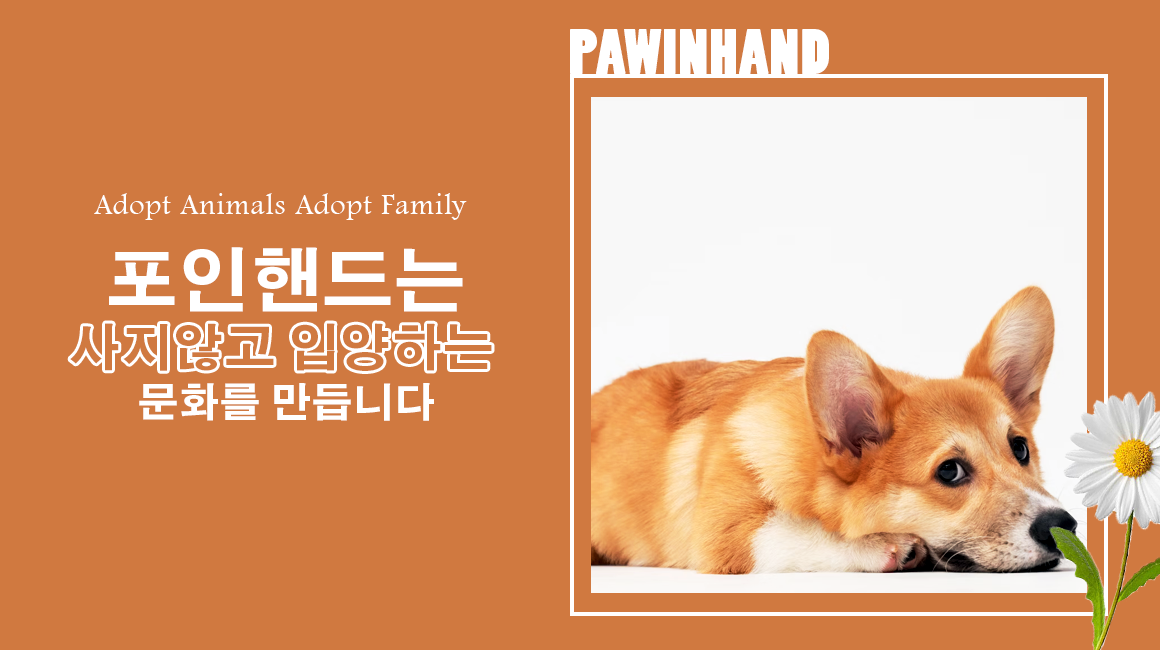
<style>
.page{position:relative;width:1160px;height:650px;background:#d07940}
.page>*{position:absolute;margin:0}
.t1{font:60px "PoplarStd";letter-spacing:0.03em;color:#ffffff}
.t2{font:30px "FootlightMTLight";letter-spacing:0.03em;color:#ffffff}
.t3{font:40px/55px "AdobeGothicStd-Bold";letter-spacing:0.03em;color:#ffffff}
.t4{font:70px/55px "AdobeGothicStd-Bold";letter-spacing:0.03em;color:#ffffff}
.t5{font:50px "AdobeGothicStd-Bold";letter-spacing:0.03em;color:#d07940}
</style>
<div class="page">
<p class="t1" style="left:570px;top:29px;width:259px;height:45px">PAWINHAND</p>
<p class="t2" style="left:94px;top:193px;width:373px;height:27px">Adopt Animals Adopt Family</p>
<p class="t3" style="left:109px;top:247px;width:354px;height:174px;text-align:center"><span class="t4">포인핸드는<br><br></span>문화를 만듭니다</p>
<p class="t5" style="left:70px;top:323px;width:422px;height:48px">사지않고 입양하는</p>
</div>
